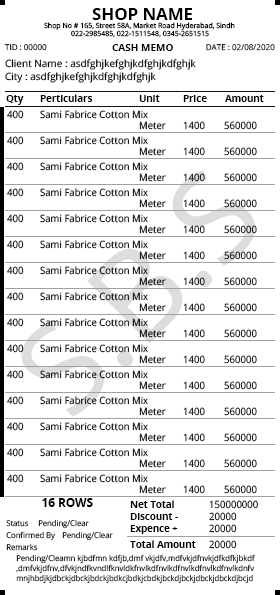
<style>
.page{position:relative;width:280px;height:595px;background:#ffffff}
.page>*{position:absolute;margin:0}
.t1{font:16.4px "OpenSans-Bold";color:#000000}
.t2{font:7px "OpenSans";color:#000000}
.t3{font:8px "OpenSans"}
.t4{font:10px "OpenSans-Bold";color:#000000}
.t5{font:10px "OpenSans";color:#000000}
.t6{font:10px "OpenSans-Bold";color:#000000;scale:0.96 1}
.t7{font:10px "OpenSans";scale:0.96 1}
.t8{font:10px "OpenSans";color:#000000;scale:0.96 1}
.t9{font:11.7px "OpenSans-Bold";color:#000000}
.t10{font:8px "OpenSans";scale:0.96 1}
.t11{font:8px/10px "OpenSans";scale:0.96 1}
</style>
<div class="page">
<p class="t1" style="left:92px;top:8px;width:100px;height:12px">SHOP NAME</p>
<p class="t2" style="left:44px;top:22px;width:191px;height:8px">Shop No # 165, Street 58A, Market Road Hyderabad, Sindh</p>
<p class="t2" style="left:71px;top:30px;width:138px;height:8px">022-2985485, 022-1511548, 0345-2651515</p>
<p class="t3" style="left:4px;top:44px;width:43px;height:7px">TID : 00000</p>
<p class="t4" style="left:112px;top:44px;width:61px;height:7px">CASH MEMO</p>
<p class="t3" style="left:206px;top:44px;width:69px;height:7px">DATE : 02/08/2020</p>
<p class="t5" style="left:5px;top:59px;width:191px;height:11px">Client Name : asdfghjkefghjkdfghjkdfghjk</p>
<p class="t5" style="left:5px;top:72px;width:151px;height:11px">City : asdfghjkefghjkdfghjkdfghjk</p>
<p class="t6" style="left:6px;top:95px;width:18px;height:10px">Qty</p>
<p class="t6" style="left:40px;top:94px;width:53px;height:8px">Perticulars</p>
<p class="t6" style="left:139px;top:95px;width:21px;height:7px">Unit</p>
<p class="t6" style="left:183px;top:95px;width:24px;height:7px">Price</p>
<p class="t6" style="left:225px;top:95px;width:39px;height:7px">Amount</p>
<p class="t7" style="left:7px;top:110px;width:17px;height:9px">400</p>
<p class="t8" style="left:40px;top:110px;width:108px;height:9px">Sami Fabrice Cotton Mix</p>
<p class="t7" style="left:139px;top:121px;width:27px;height:9px">Meter</p>
<p class="t7" style="left:183px;top:121px;width:22px;height:9px">1400</p>
<p class="t7" style="left:224px;top:121px;width:33px;height:9px">560000</p>
<p class="t7" style="left:7px;top:136px;width:17px;height:9px">400</p>
<p class="t8" style="left:40px;top:136px;width:108px;height:9px">Sami Fabrice Cotton Mix</p>
<p class="t7" style="left:139px;top:147px;width:27px;height:9px">Meter</p>
<p class="t7" style="left:183px;top:147px;width:22px;height:9px">1400</p>
<p class="t7" style="left:224px;top:147px;width:33px;height:9px">560000</p>
<p class="t7" style="left:7px;top:162px;width:17px;height:9px">400</p>
<p class="t8" style="left:40px;top:162px;width:108px;height:9px">Sami Fabrice Cotton Mix</p>
<p class="t7" style="left:139px;top:173px;width:27px;height:9px">Meter</p>
<p class="t7" style="left:183px;top:173px;width:22px;height:9px">1400</p>
<p class="t7" style="left:224px;top:173px;width:33px;height:9px">560000</p>
<p class="t7" style="left:7px;top:188px;width:17px;height:9px">400</p>
<p class="t8" style="left:40px;top:188px;width:108px;height:9px">Sami Fabrice Cotton Mix</p>
<p class="t7" style="left:139px;top:199px;width:27px;height:9px">Meter</p>
<p class="t7" style="left:183px;top:199px;width:22px;height:9px">1400</p>
<p class="t7" style="left:224px;top:199px;width:33px;height:9px">560000</p>
<p class="t7" style="left:7px;top:214px;width:17px;height:9px">400</p>
<p class="t8" style="left:40px;top:214px;width:108px;height:9px">Sami Fabrice Cotton Mix</p>
<p class="t7" style="left:139px;top:225px;width:27px;height:9px">Meter</p>
<p class="t7" style="left:183px;top:225px;width:22px;height:9px">1400</p>
<p class="t7" style="left:224px;top:225px;width:33px;height:9px">560000</p>
<p class="t7" style="left:7px;top:240px;width:17px;height:9px">400</p>
<p class="t8" style="left:40px;top:240px;width:108px;height:9px">Sami Fabrice Cotton Mix</p>
<p class="t7" style="left:139px;top:251px;width:27px;height:9px">Meter</p>
<p class="t7" style="left:183px;top:251px;width:22px;height:9px">1400</p>
<p class="t7" style="left:224px;top:251px;width:33px;height:9px">560000</p>
<p class="t7" style="left:7px;top:266px;width:17px;height:9px">400</p>
<p class="t8" style="left:40px;top:266px;width:108px;height:9px">Sami Fabrice Cotton Mix</p>
<p class="t7" style="left:139px;top:277px;width:27px;height:9px">Meter</p>
<p class="t7" style="left:183px;top:277px;width:22px;height:9px">1400</p>
<p class="t7" style="left:224px;top:277px;width:33px;height:9px">560000</p>
<p class="t7" style="left:7px;top:292px;width:17px;height:9px">400</p>
<p class="t8" style="left:40px;top:292px;width:108px;height:9px">Sami Fabrice Cotton Mix</p>
<p class="t7" style="left:139px;top:303px;width:27px;height:9px">Meter</p>
<p class="t7" style="left:183px;top:303px;width:22px;height:9px">1400</p>
<p class="t7" style="left:224px;top:303px;width:33px;height:9px">560000</p>
<p class="t7" style="left:7px;top:318px;width:17px;height:9px">400</p>
<p class="t8" style="left:40px;top:318px;width:108px;height:9px">Sami Fabrice Cotton Mix</p>
<p class="t7" style="left:139px;top:329px;width:27px;height:9px">Meter</p>
<p class="t7" style="left:183px;top:329px;width:22px;height:9px">1400</p>
<p class="t7" style="left:224px;top:329px;width:33px;height:9px">560000</p>
<p class="t7" style="left:7px;top:344px;width:17px;height:9px">400</p>
<p class="t8" style="left:40px;top:344px;width:108px;height:9px">Sami Fabrice Cotton Mix</p>
<p class="t7" style="left:139px;top:355px;width:27px;height:9px">Meter</p>
<p class="t7" style="left:183px;top:355px;width:22px;height:9px">1400</p>
<p class="t7" style="left:224px;top:355px;width:33px;height:9px">560000</p>
<p class="t7" style="left:7px;top:370px;width:17px;height:9px">400</p>
<p class="t8" style="left:40px;top:370px;width:108px;height:9px">Sami Fabrice Cotton Mix</p>
<p class="t7" style="left:139px;top:381px;width:27px;height:9px">Meter</p>
<p class="t7" style="left:183px;top:381px;width:22px;height:9px">1400</p>
<p class="t7" style="left:224px;top:381px;width:33px;height:9px">560000</p>
<p class="t7" style="left:7px;top:396px;width:17px;height:9px">400</p>
<p class="t8" style="left:40px;top:396px;width:108px;height:9px">Sami Fabrice Cotton Mix</p>
<p class="t7" style="left:139px;top:407px;width:27px;height:9px">Meter</p>
<p class="t7" style="left:183px;top:407px;width:22px;height:9px">1400</p>
<p class="t7" style="left:224px;top:407px;width:33px;height:9px">560000</p>
<p class="t7" style="left:7px;top:422px;width:17px;height:9px">400</p>
<p class="t8" style="left:40px;top:422px;width:108px;height:9px">Sami Fabrice Cotton Mix</p>
<p class="t7" style="left:139px;top:433px;width:27px;height:9px">Meter</p>
<p class="t7" style="left:183px;top:433px;width:22px;height:9px">1400</p>
<p class="t7" style="left:224px;top:433px;width:33px;height:9px">560000</p>
<p class="t7" style="left:7px;top:448px;width:17px;height:9px">400</p>
<p class="t8" style="left:40px;top:448px;width:108px;height:9px">Sami Fabrice Cotton Mix</p>
<p class="t7" style="left:139px;top:459px;width:27px;height:9px">Meter</p>
<p class="t7" style="left:183px;top:459px;width:22px;height:9px">1400</p>
<p class="t7" style="left:224px;top:459px;width:33px;height:9px">560000</p>
<p class="t7" style="left:7px;top:474px;width:17px;height:9px">400</p>
<p class="t8" style="left:40px;top:474px;width:108px;height:9px">Sami Fabrice Cotton Mix</p>
<p class="t7" style="left:139px;top:485px;width:27px;height:9px">Meter</p>
<p class="t7" style="left:183px;top:485px;width:22px;height:9px">1400</p>
<p class="t7" style="left:224px;top:485px;width:33px;height:9px">560000</p>
<p class="t9" style="left:42px;top:498px;width:51px;height:9px">16 ROWS</p>
<p class="t6" style="left:130px;top:500px;width:44px;height:8px">Net Total</p>
<p class="t7" style="left:209px;top:500px;width:49px;height:9px">150000000</p>
<p class="t10" style="left:6px;top:520px;width:23px;height:7px">Status</p>
<p class="t10" style="left:38px;top:519px;width:51px;height:10px">Pending/Clear</p>
<p class="t6" style="left:130px;top:513px;width:48px;height:7px">Discount -</p>
<p class="t7" style="left:209px;top:512px;width:28px;height:9px">20000</p>
<p class="t10" style="left:6px;top:531px;width:49px;height:10px">Confirmed By</p>
<p class="t10" style="left:62px;top:531px;width:51px;height:10px">Pending/Clear</p>
<p class="t6" style="left:130px;top:525px;width:48px;height:9px">Expence +</p>
<p class="t7" style="left:209px;top:524px;width:28px;height:9px">20000</p>
<p class="t10" style="left:6px;top:543px;width:32px;height:8px">Remarks</p>
<p class="t6" style="left:130px;top:540px;width:66px;height:8px">Total Amount</p>
<p class="t7" style="left:209px;top:540px;width:28px;height:9px">20000</p>
<p class="t11" style="left:16px;top:554px;width:239px;height:30px">Pending/Cleamn kjbdfmn kdfjb,dmf vkjdfv,mdfvkjdfnvkjdfkdfkjbkdf<br>,dmfvkjdfnv,dfvkjndfkvndlfknvldkfnvlkdfnvlkdfnvlkdfnvlkdfnvlkdnfv<br>mnjhbdjkjdbckjdbckjbdckjbdkcjbdkjcbdkjbckdjbckjdbckjdbckdjbcjd</p>
</div>
